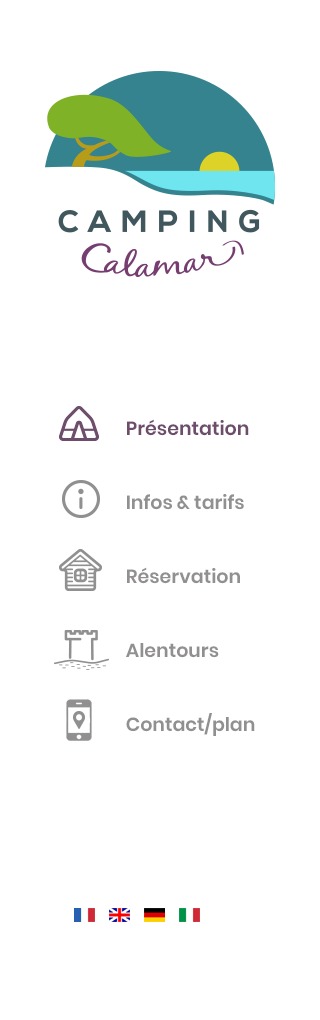
<style>
.page{position:relative;width:320px;height:1020px;background:#ffffff}
.page>*{position:absolute;margin:0}
.t1{font:19px "Poppins-SemiBold";color:#6e4d6b}
.t2{font:19px "Poppins-SemiBold";color:#918f8f}
</style>
<div class="page">
<p class="t1" style="left:127px;top:419px;width:122px;height:17px">Présentation</p>
<p class="t2" style="left:127px;top:494px;width:117px;height:16px">Infos &amp; tarifs</p>
<p class="t2" style="left:127px;top:567px;width:113px;height:17px">Réservation</p>
<p class="t2" style="left:126px;top:643px;width:93px;height:15px">Alentours</p>
<p class="t2" style="left:126px;top:713px;width:129px;height:23px">Contact/plan</p>
</div>
